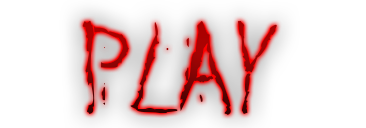
<style>
.page{position:relative;width:366px;height:128px;background:#ffffff}
.page>*{position:absolute;margin:0}
.t1{font:133.2px "AboutDead"}
</style>
<div class="page">
<p class="t1" style="left:82px;top:20px;width:195px;height:95px">pLAY</p>
</div>
